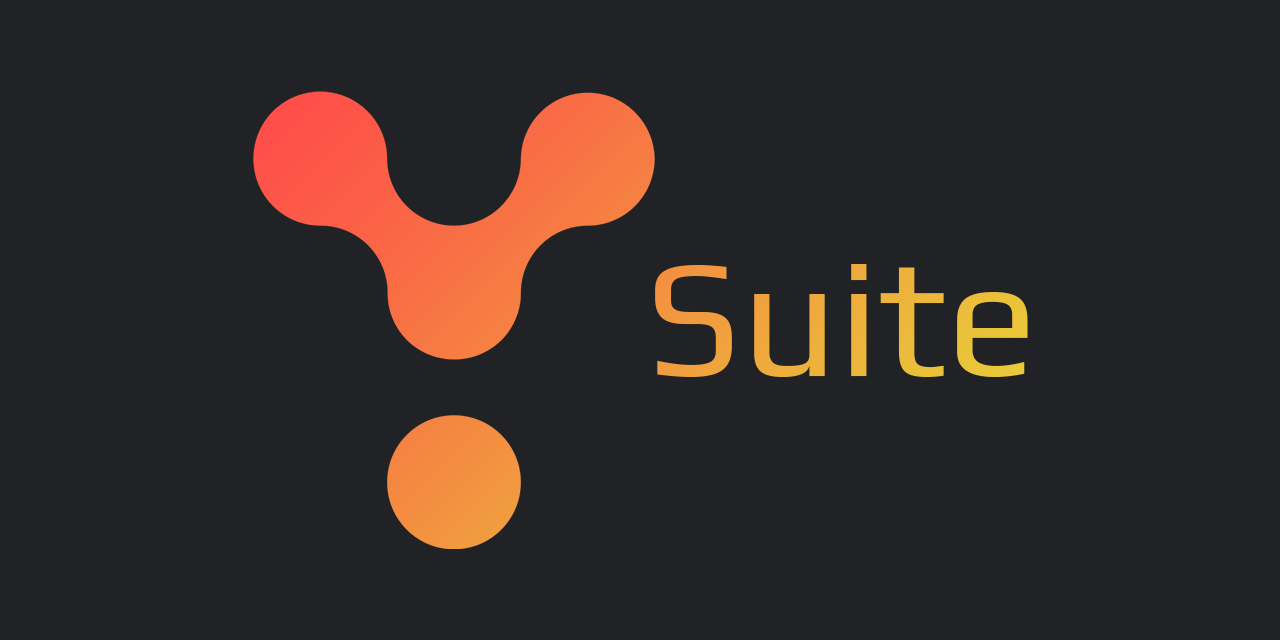
<style>
.page{position:relative;width:1280px;height:640px;background:#202225}
.page>*{position:absolute;margin:0}
.t1{font:169px "Play-Regular";color:#edb03c}
</style>
<div class="page">
<p class="t1" style="left:655px;top:264px;width:373px;height:113px">Suite</p>
</div>
